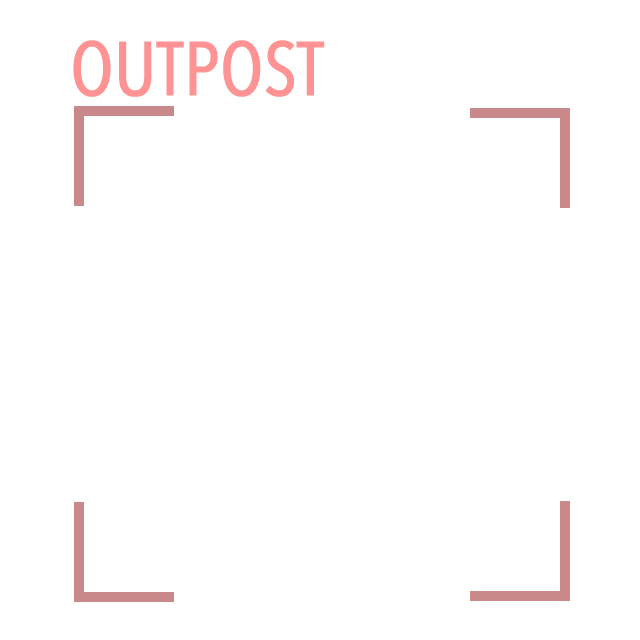
<style>
.page{position:relative;width:640px;height:640px;background:#ffffff}
.page>*{position:absolute;margin:0}
.t1{font:76px "AvenirNextCondensed-Medium";color:#ff9393}
</style>
<div class="page">
<p class="t1" style="left:73px;top:40px;width:252px;height:57px">OUTPOST</p>
</div>
